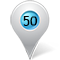
<style>
.page{position:relative;width:60px;height:60px;background:#ffffff}
.page>*{position:absolute;margin:0}
.t1{font:14.1px "TrebuchetMS";color:#000000}
</style>
<div class="page">
<p class="t1" style="left:23px;top:16px;width:14px;height:10px">50</p>
</div>
